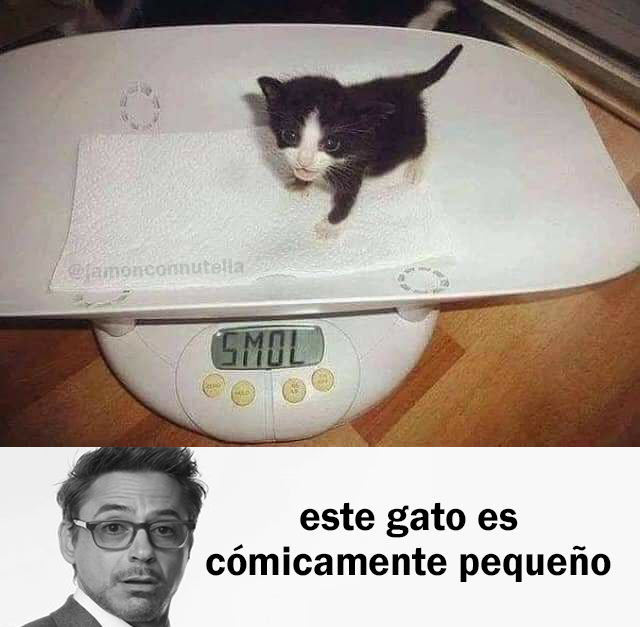
<style>
.page{position:relative;width:640px;height:627px}
.page>*{position:absolute;margin:0}
.t1{font:21.8px "FranklinGothic-Demi";color:#babcb7}
.t2{font:41.9px "FranklinGothic-Demi";color:#000000}
</style>
<div class="page">
<p class="t1" style="left:68px;top:258px;width:176px;height:25px;rotate:-2deg">@jamonconnutella</p>
<p class="t2" style="left:206px;top:502px;width:405px;height:80px;text-align:center">este gato es<br>cómicamente pequeño</p>
</div>
